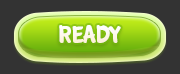
<style>
.page{position:relative;width:180px;height:74px;background:#333333}
.page>*{position:absolute;margin:0}
.t1{font:25px "Cartwheel";color:#ffffff}
</style>
<div class="page">
<p class="t1" style="left:59px;top:25px;width:62px;height:18px">READY</p>
</div>
